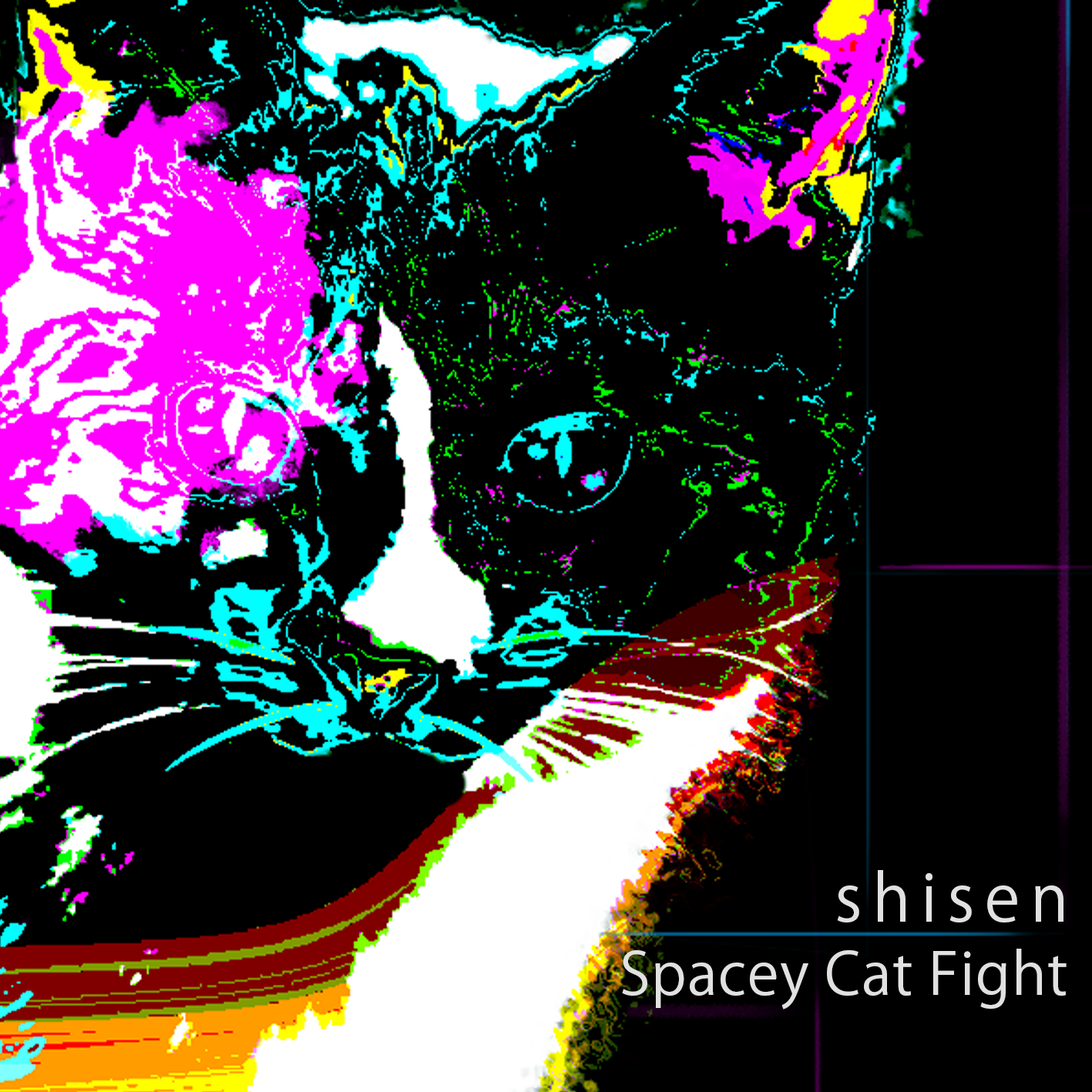
<style>
.page{position:relative;width:1092px;height:1092px;background:#000000}
.page>*{position:absolute;margin:0}
.t1{font:64.5px "KozGoPr6N-Regular";letter-spacing:0.16em;color:#e1e1e1}
.t2{font:57.8px "KozGoPr6N-Regular";letter-spacing:0.02em;color:#e1e1e1}
</style>
<div class="page">
<p class="t1" style="left:837px;top:870px;width:226px;height:52px">shisen</p>
<p class="t2" style="left:622px;top:949px;width:445px;height:61px">Spacey Cat Fight</p>
</div>
